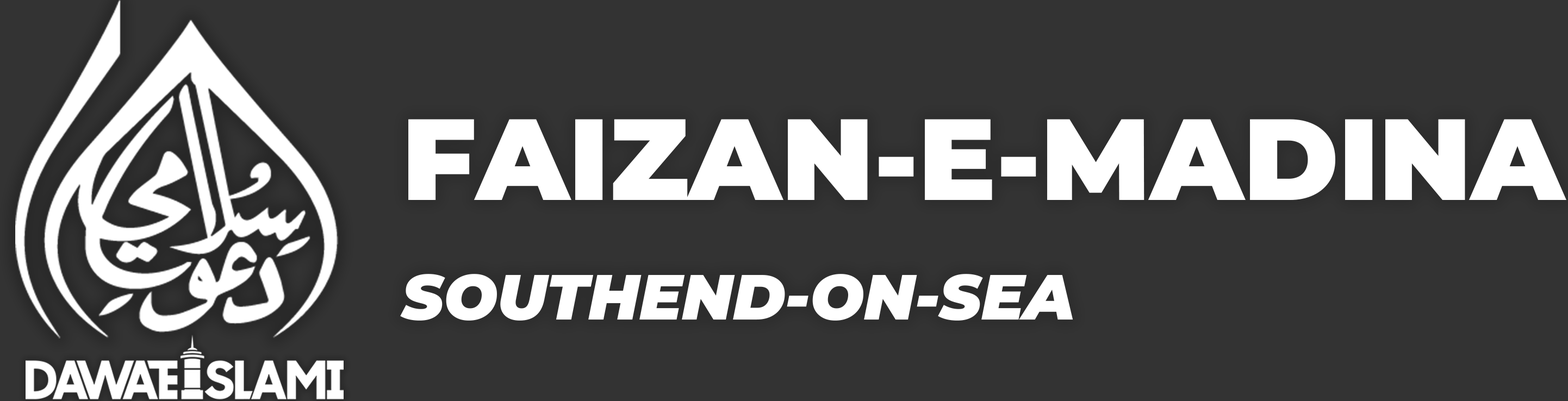
<style>
.page{position:relative;width:1568px;height:401px;background:#333333}
.page>*{position:absolute;margin:0}
.t1{font:115.1px/54.5px "Montserrat-Black";color:#ffffff}
.t2{font:63.5px/54.5px "MontserratItalic-BlackItalic";color:#ffffff}
</style>
<div class="page">
<p class="t1" style="left:400px;top:119px;width:1166px;height:202px">FAIZAN-E-MADINA<br><br><br><span class="t2">SOUTHEND-ON-SEA</span></p>
</div>
